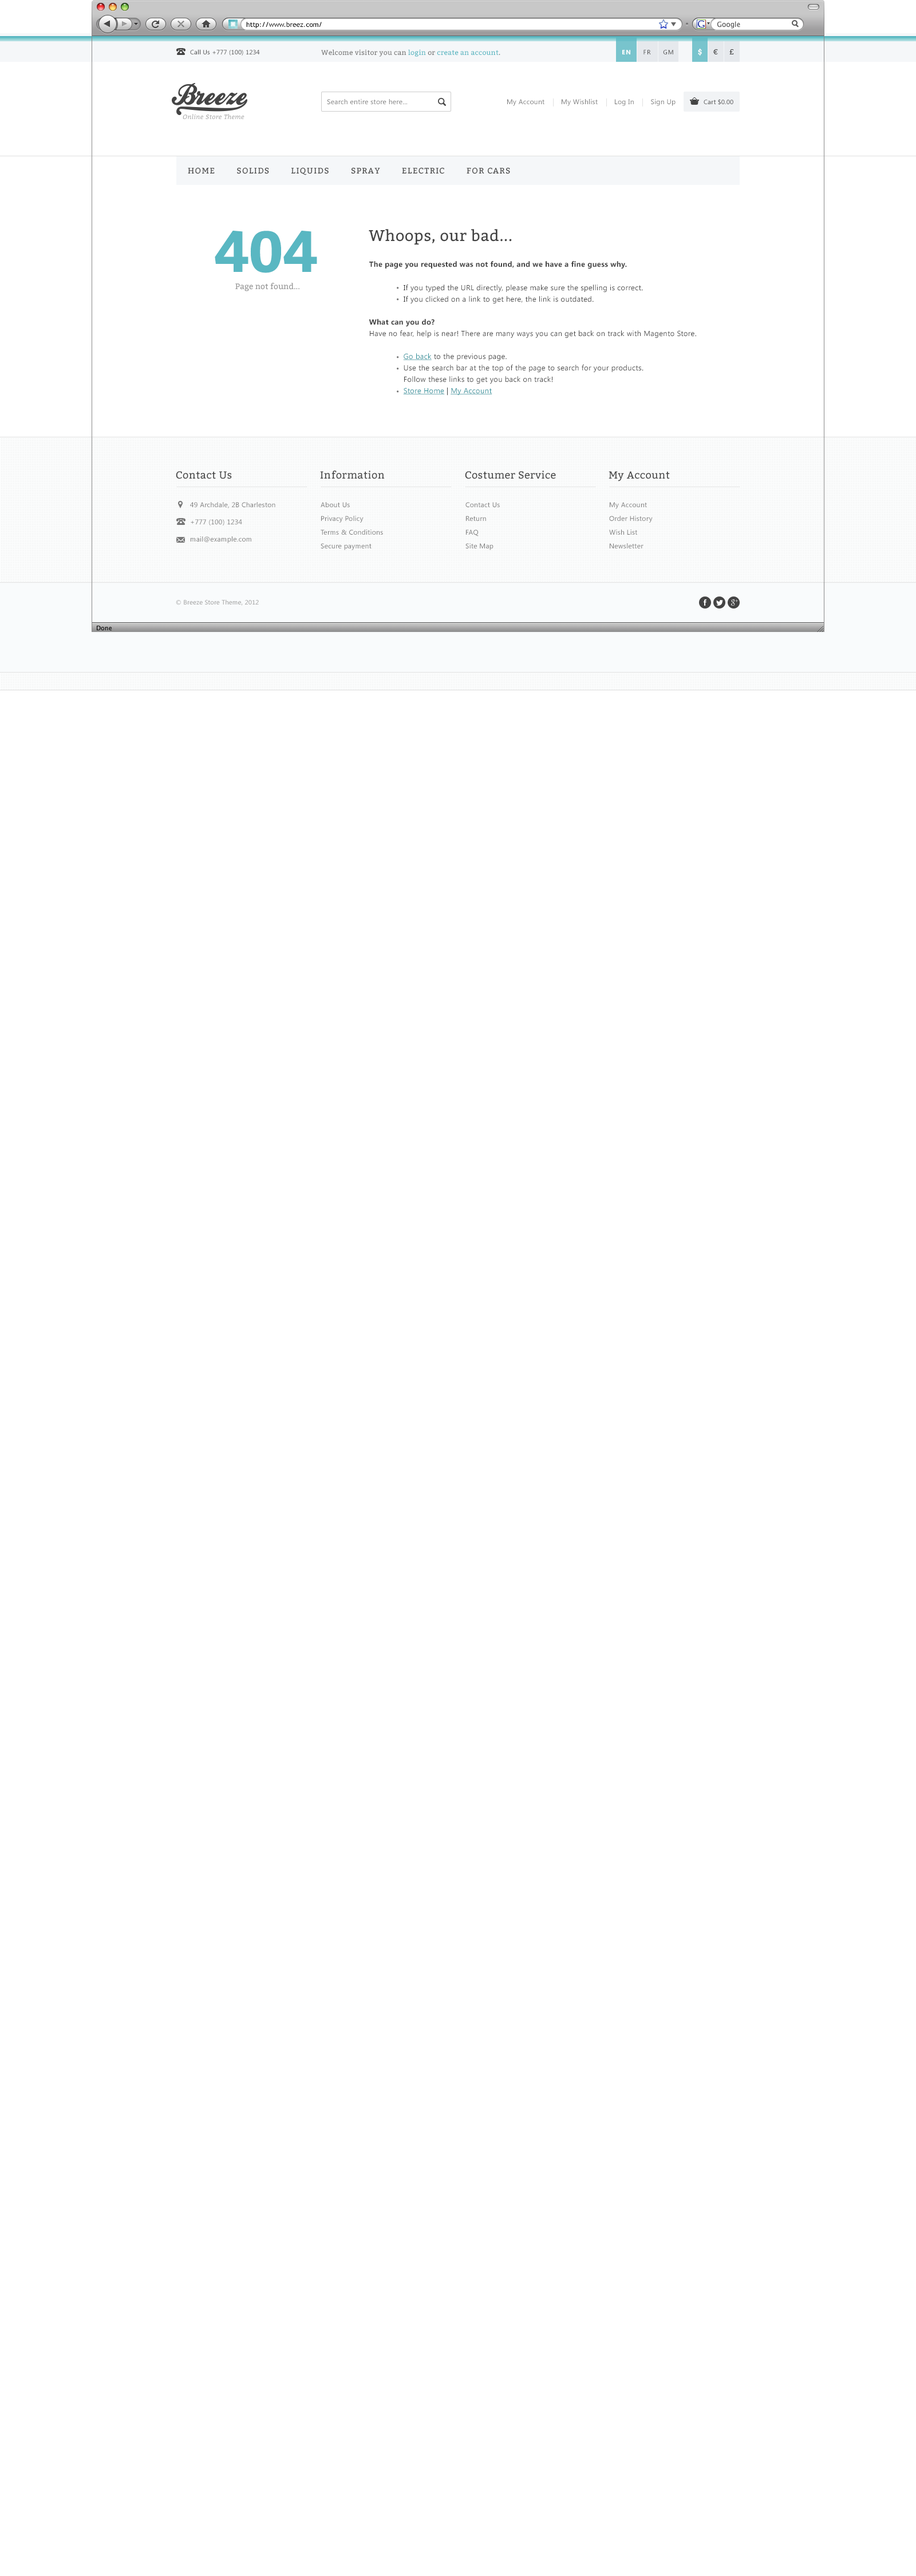
<style>
.page{position:relative;width:916px;height:2576px;background:#ffffff}
.page>*{position:absolute;margin:0}
.t1{font:6.9px "TrebuchetMS";color:#000000}
.t2{font:6.3px "SegoeUI";letter-spacing:0.025em;color:#444444}
.t3{font:6.9px "Bitter-Regular";letter-spacing:0.025em;color:#777777}
.t4{font:6.9px "Bitter-Regular";letter-spacing:0.025em;color:#59b7c2}
.t5{font:6.3px "SegoeUI";letter-spacing:0.1em;color:#444444}
.t6{font:6.3px "SegoeUI-Bold";letter-spacing:0.1em;color:#ffffff}
.t7{font:7.4px "Bitter-Regular";letter-spacing:0.118em;color:#444444}
.t8{font:7.4px "Bitter-Bold";letter-spacing:0.118em;color:#ffffff}
.t9{font:6.9px "SegoeUI";letter-spacing:0.025em;color:#777777}
.t10{font:6.3px "Bitter-Italic";letter-spacing:0.025em;color:#a9a9a9}
.t11{font:8px "Bitter-Regular";letter-spacing:0.1em;color:#444444;text-transform:uppercase}
.t12{font:57.3px "Bitter-Bold";letter-spacing:-0.05em;color:#59b7c2}
.t13{font:15.5px "Bitter-Regular";letter-spacing:0.025em;color:#444444}
.t14{font:7.4px/11.5px "SegoeUI";letter-spacing:0.025em;color:#444444}
.t15{font:7.4px/11.5px "SegoeUI-Bold";letter-spacing:0.025em;color:#444444}
.t16{font:7.4px/11.5px "SegoeUI";letter-spacing:0.025em;color:#2e8f9a;text-decoration:underline}
.t17{font:8px "Bitter-Regular";color:#999999}
.t18{font:7.4px/11.5px "SegoeUI";letter-spacing:0.025em;color:#777777}
.t19{font:10.3px "Bitter-Regular";letter-spacing:0.025em;color:#444444}
.t20{font:6.9px/17.2px "SegoeUI";letter-spacing:0.025em;color:#777777}
.t21{font:6.9px/13.7px "SegoeUI";letter-spacing:0.025em;color:#777777}
.t22{font:6.3px "SegoeUI";letter-spacing:0.025em;color:#999999}
</style>
<div class="page">
<p class="t1" style="left:246px;top:22px;width:76px;height:7px">http://www.breez.com/</p>
<p class="t2" style="left:190px;top:49px;width:70px;height:7px">Call Us +777 (100) 1234</p>
<p class="t3" style="left:321px;top:49px;width:179px;height:8px">Welcome visitor you can <span class="t4">login </span>or <span class="t4">create an account</span>.</p>
<p class="t5" style="left:622px;top:50px;width:51px;height:4px"><span class="t6">EN     </span>FR     GM</p>
<p class="t7" style="left:698px;top:48px;width:36px;height:8px"><span class="t8">$    </span>€    £</p>
<p class="t9" style="left:327px;top:99px;width:80px;height:5px">Search entire store here...</p>
<p class="t9" style="left:507px;top:99px;width:168px;height:7px">My Account        My Wishlist        Log In        Sign Up</p>
<p class="t2" style="left:704px;top:99px;width:29px;height:6px">Cart $0.00</p>
<p class="t10" style="left:183px;top:114px;width:61px;height:5px">Online Store Theme</p>
<p class="t11" style="left:188px;top:168px;width:322px;height:7px">Home        Solids        Liquids        Spray        Electric        For cars</p>
<p class="t12" style="left:215px;top:231px;width:102px;height:42px">404</p>
<p class="t13" style="left:369px;top:229px;width:143px;height:16px">Whoops, our bad...</p>
<p class="t14" style="left:369px;top:261px;width:327px;height:135px"><span class="t15">The page you requested was not found, and we have a fine guess why.<br></span><br>If you typed the URL directly, please make sure the spelling is correct.<br>If you clicked on a link to get here, the link is outdated.<br><br><span class="t15">What can you do?<br></span>Have no fear, help is near! There are many ways you can get back on track with Magento Store.<br><br><span class="t16">Go back</span> to the previous page.<br>Use the search bar at the top of the page to search for your products.<br>Follow these links to get you back on track!<br><span class="t16">Store Home</span> | <span class="t16">My Account</span></p>
<p class="t17" style="left:235px;top:283px;width:64px;height:8px">Page not found...</p>
<p class="t18" style="left:397px;top:287px;width:2px;height:14px">•<br>•</p>
<p class="t18" style="left:397px;top:356px;width:2px;height:37px">•<br>•<br><br>•</p>
<p class="t19" style="left:176px;top:471px;width:56px;height:8px">Contact Us</p>
<p class="t19" style="left:320px;top:471px;width:64px;height:8px">Information</p>
<p class="t19" style="left:465px;top:471px;width:91px;height:8px">Costumer Service</p>
<p class="t19" style="left:609px;top:471px;width:61px;height:10px">My Account</p>
<p class="t20" style="left:190px;top:502px;width:85px;height:41px"><span class="t21">49 Archdale, 2B Charleston<br></span>+777 (100) 1234<br>mail@example.com</p>
<p class="t21" style="left:321px;top:502px;width:62px;height:48px">About Us<br>Privacy Policy<br>Terms &amp; Conditions<br>Secure payment</p>
<p class="t21" style="left:465px;top:502px;width:35px;height:48px">Contact Us<br>Return<br>FAQ<br>Site Map</p>
<p class="t21" style="left:609px;top:502px;width:44px;height:46px">My Account<br>Order History<br>Wish List<br>Newsletter</p>
<p class="t22" style="left:176px;top:599px;width:83px;height:7px">© Breeze Store Theme, 2012</p>
</div>
